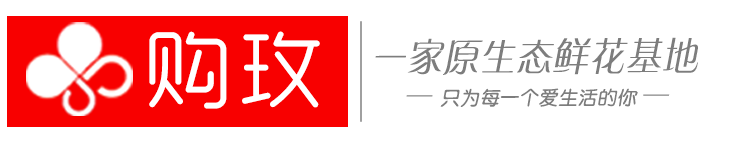
<style>
.page{position:relative;width:741px;height:141px;background:#ffffff}
.page>*{position:absolute;margin:0}
.t1{font:85.6px "MFYueYuan_Noncommercial-Regular";letter-spacing:0.08em;color:#ffffff}
.t2{font:39px "GJJZQJW--GB1-0";letter-spacing:0.04em;color:#7d7d7d;scale:0.9 1}
.t3{font:19.3px "JZunYuan";letter-spacing:0.04em;color:#7d7d7d}
.t4{font:26.1px "GJJZQJW--GB1-0";letter-spacing:0.04em;color:#7d7d7d}
</style>
<div class="page">
<p class="t1" style="left:149px;top:31px;width:171px;height:78px">购玫</p>
<p class="t2" style="left:375px;top:37px;width:323px;height:38px">一家原生态鲜花基地</p>
<p class="t3" style="left:406px;top:88px;width:264px;height:19px"><span class="t4">— </span>只为每一个爱生活的你 <span class="t4">—</span></p>
</div>
